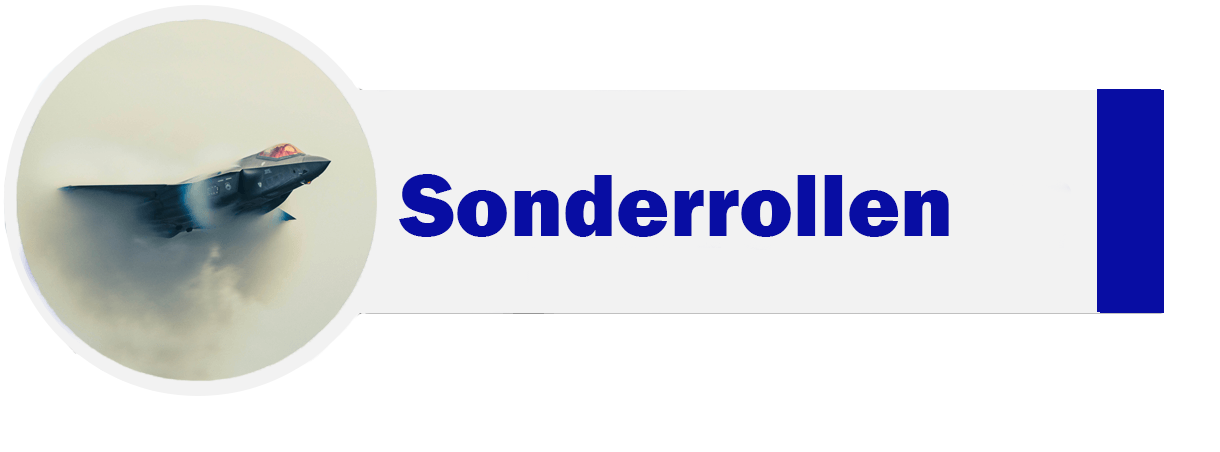
<style>
.page{position:relative;width:1220px;height:452px;background:#ffffff}
.page>*{position:absolute;margin:0}
.t1{font:91px "FranklinGothic-Heavy";color:#080da3}
</style>
<div class="page">
<p class="t1" style="left:399px;top:174px;width:550px;height:63px">Sonderrollen</p>
</div>
